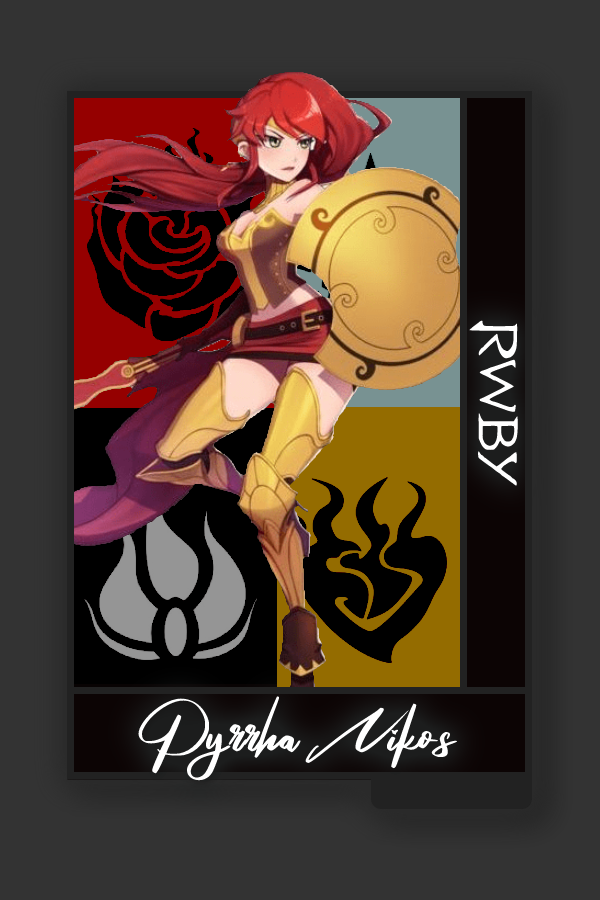
<style>
.page{position:relative;width:600px;height:900px;background:#333333}
.page>*{position:absolute;margin:0}
.t1{font:61.3px "RWBY_Style";color:#ffffff;scale:1.25 1}
.t2{font:76.6px "RosegaFREE";color:#ffffff;scale:0.91 1}
</style>
<div class="page">
<p class="t1" style="left:469px;top:320px;width:49px;height:166px;rotate:90deg">RWBY</p>
<p class="t2" style="left:136px;top:696px;width:322px;height:90px">Pyrrha Nikos</p>
</div>
